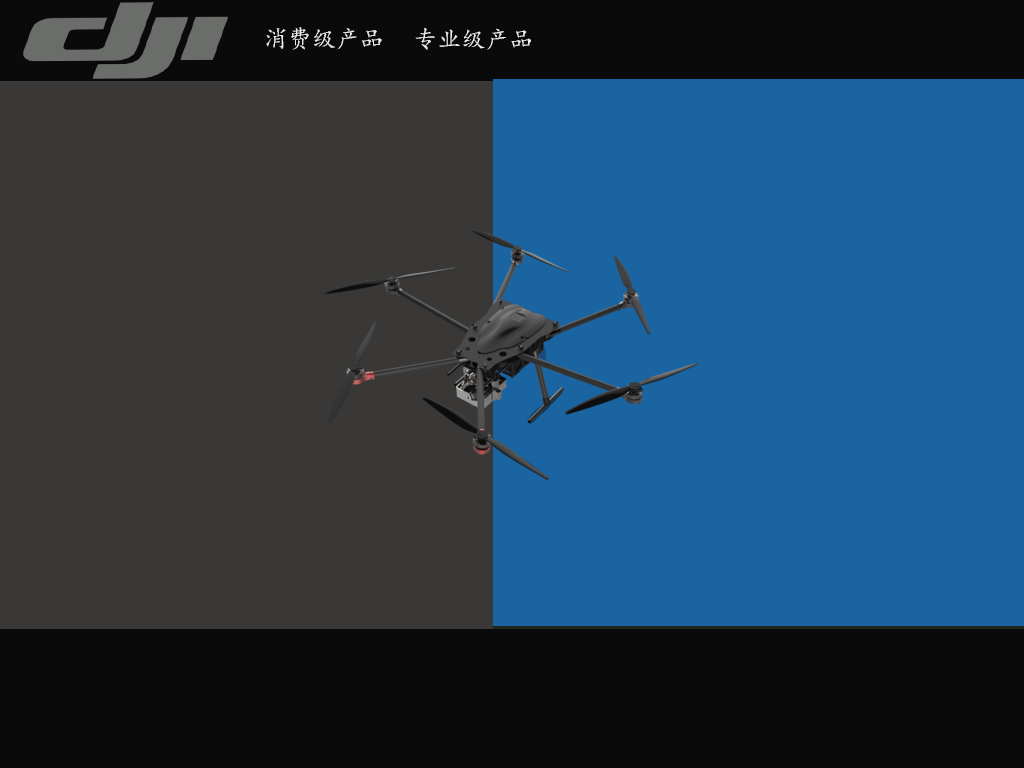
<style>
.page{position:relative;width:1024px;height:768px;background:#1b64a2}
.page>*{position:absolute;margin:0}
.t1{font:24px "¿¬Ìå";color:#eeeeee}
</style>
<div class="page">
<p class="t1" style="left:266px;top:27px;width:116px;height:23px">消费级产品</p>
<p class="t1" style="left:415px;top:28px;width:116px;height:22px">专业级产品</p>
</div>
